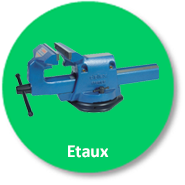
<style>
.page{position:relative;width:185px;height:185px;background:#00cc66}
.page>*{position:absolute;margin:0}
.t1{font:18px "Calibri-Bold";color:#ffffff}
</style>
<div class="page">
<p class="t1" style="left:68px;top:145px;width:41px;height:13px">Etaux</p>
</div>
